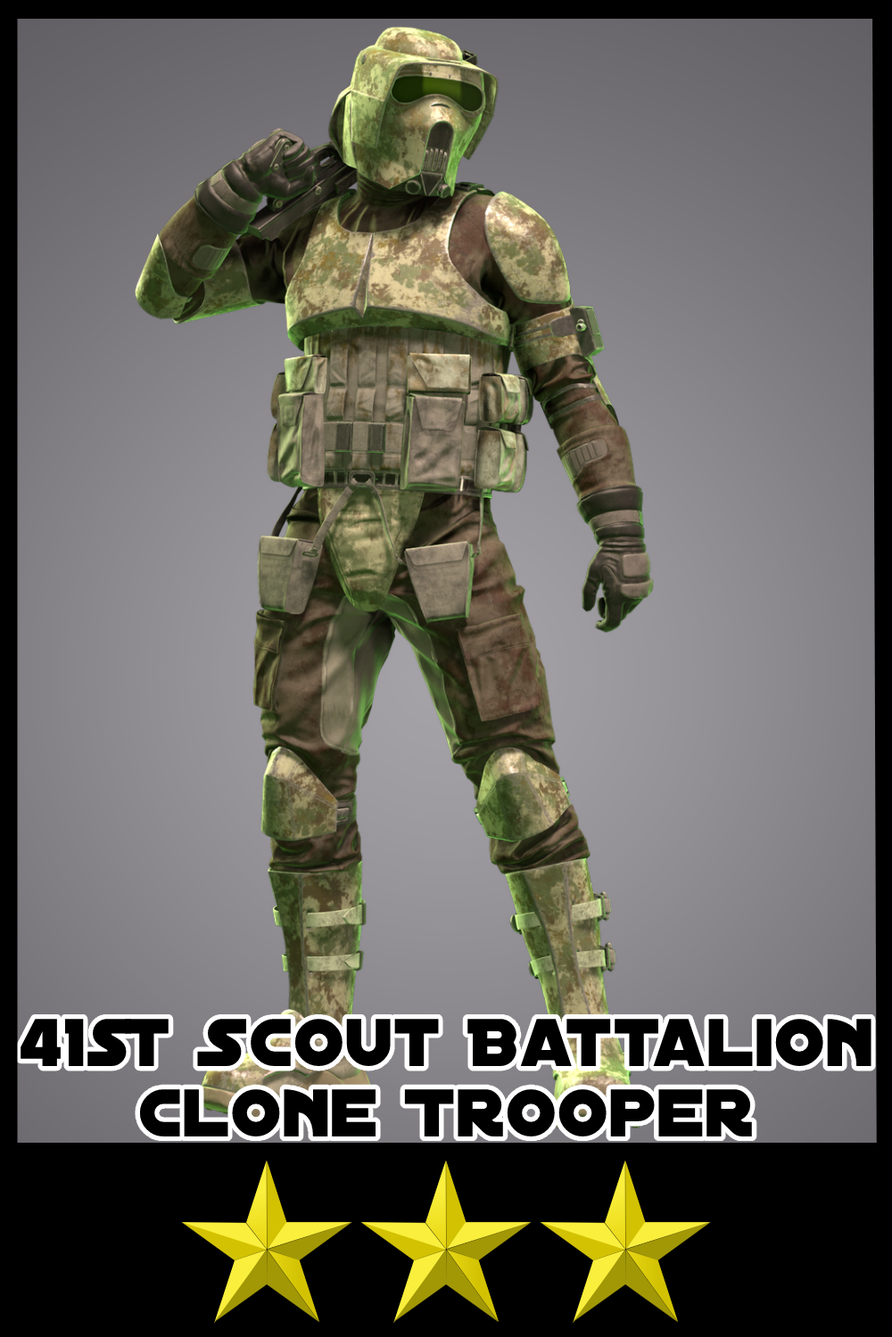
<style>
.page{position:relative;width:892px;height:1337px}
.page>*{position:absolute;margin:0}
.t1{font:72.5px/69.9px "DistantGalaxy";letter-spacing:0.012em;color:#000000}
</style>
<div class="page">
<p class="t1" style="left:21px;top:1019px;width:850px;height:118px;text-align:center">41st Scout Battalion<br>Clone Trooper</p>
</div>
